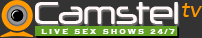
<style>
.page{position:relative;width:202px;height:38px;background:#333333}
.page>*{position:absolute;margin:0}
.t1{font:30.8px "Neuropol-Regular";color:#fff7f8;scale:0.9 1}
.t2{font:24px "Avenir-Oblique";color:#ff9800}
.t3{font:10px "Copperplate-Bold";letter-spacing:0.2em;color:#ffffff;scale:0.9 1}
</style>
<div class="page">
<p class="t1" style="left:35px;top:2px;width:143px;height:22px">Camstel</p>
<p class="t2" style="left:182px;top:3px;width:20px;height:14px">tv</p>
<p class="t3" style="left:41px;top:28px;width:134px;height:6px">LIVE SEX SHOWS 24/7</p>
</div>
